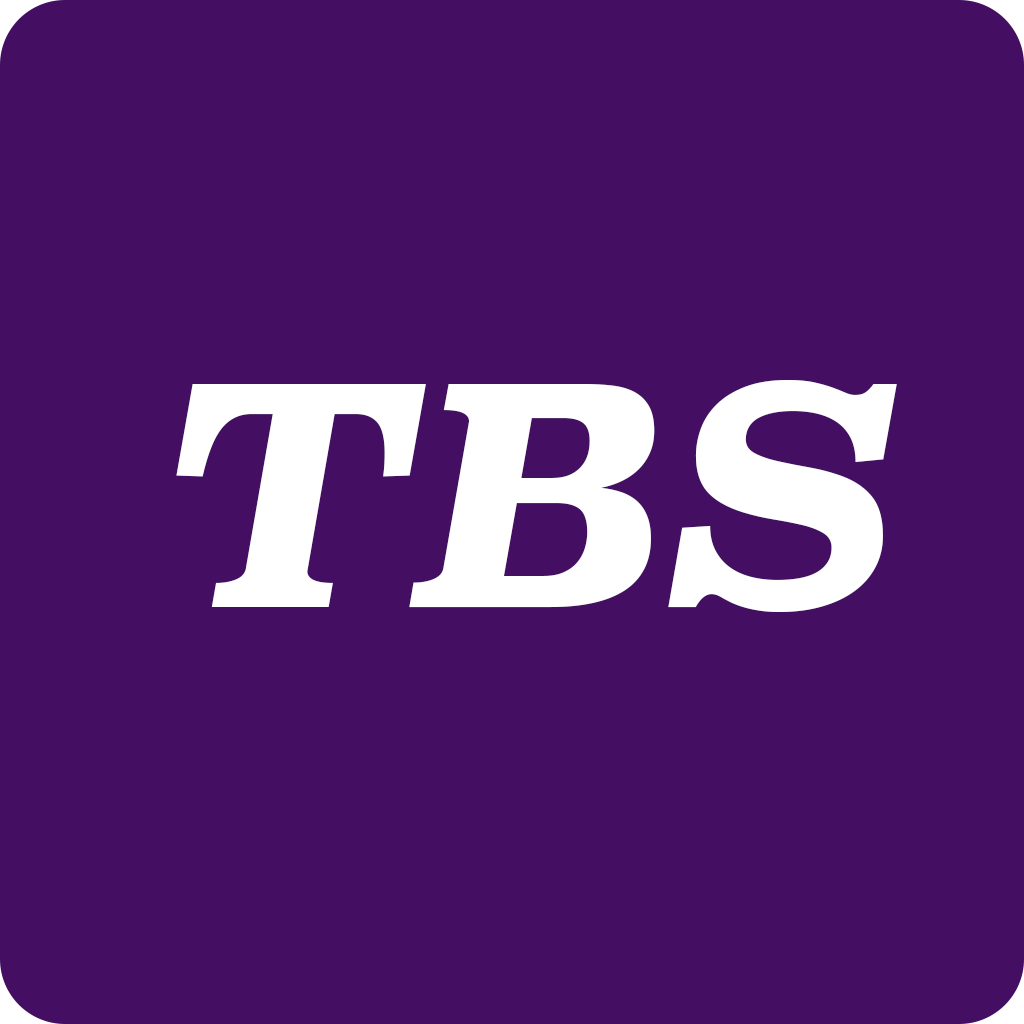
<style>
.page{position:relative;width:1024px;height:1024px;background:#440e62}
.page>*{position:absolute;margin:0}
.t1{font:300px "Superclarendon-BoldItalic";color:#ffffff}
</style>
<div class="page">
<p class="t1" style="left:176px;top:380px;width:721px;height:232px">TBS</p>
</div>
